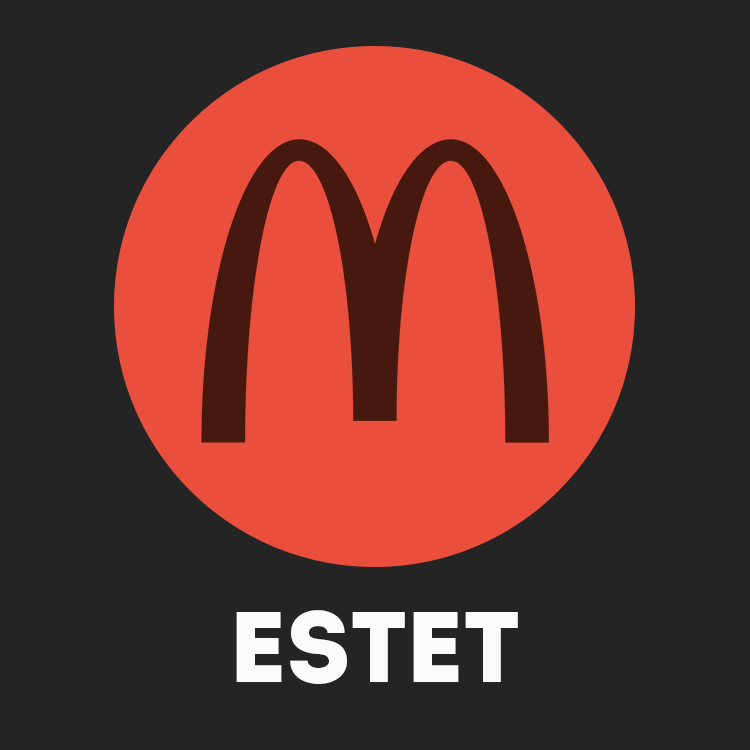
<style>
.page{position:relative;width:750px;height:750px;background:#242424}
.page>*{position:absolute;margin:0}
.t1{font:100px "Intro-Black";color:#fbfbfb}
</style>
<div class="page">
<p class="t1" style="left:236px;top:610px;width:282px;height:74px">ESTET</p>
</div>
